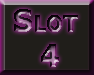
<style>
.page{position:relative;width:94px;height:75px;background:#201e1a}
.page>*{position:absolute;margin:0}
.t1{font:30px "Tahoma-Bold";font-variant:small-caps;font-weight:bold}
</style>
<div class="page">
<p class="t1" style="left:14px;top:9px;width:64px;height:58px;text-align:center">Slot <br>4</p>
</div>
